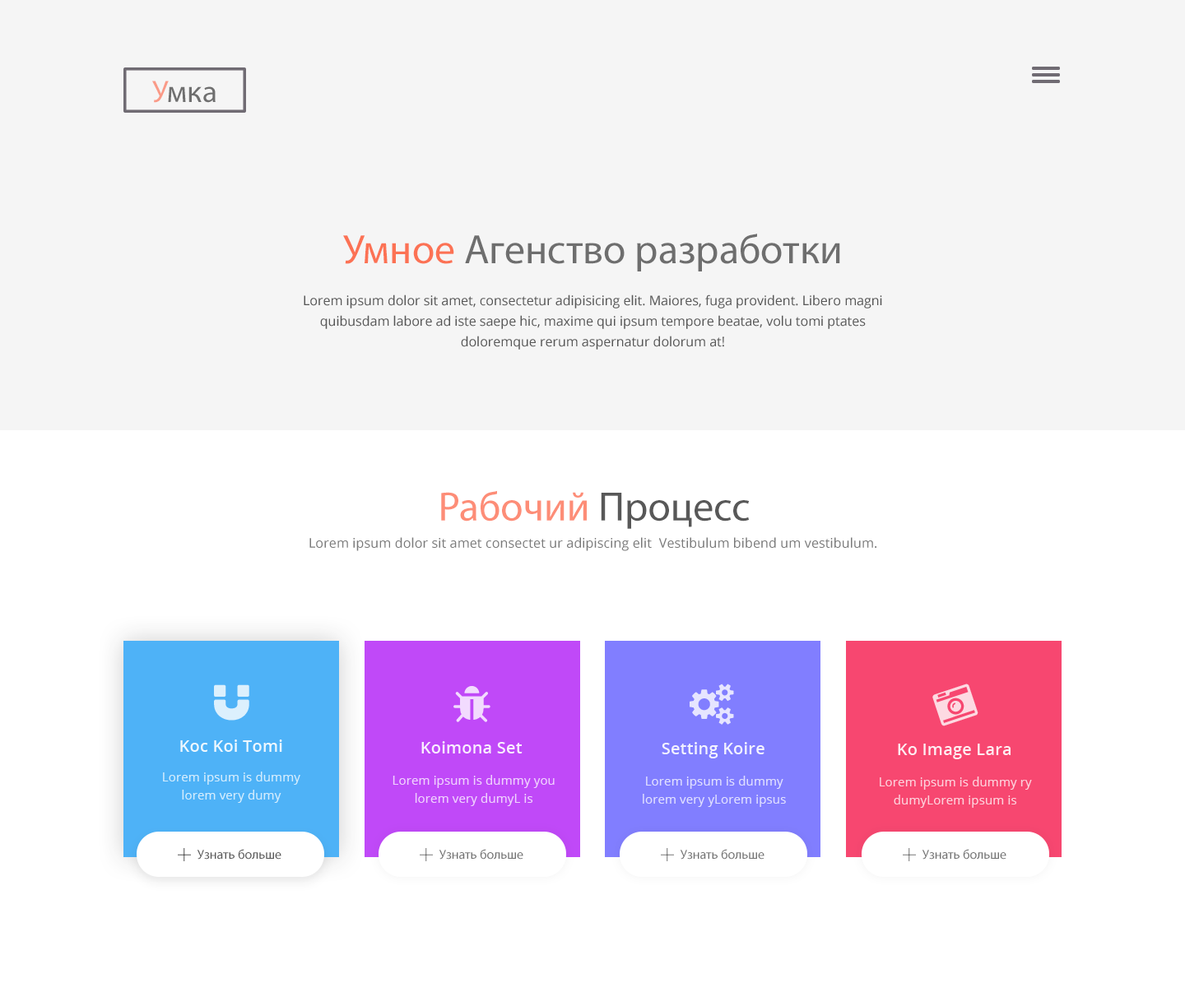
<style>
.page{position:relative;width:1185px;height:1006px;background:#ffffff}
.page>*{position:absolute;margin:0}
.t1{font:31.1px "MyriadPro-Regular";color:#6f6f6f}
.t2{font:41.1px "MyriadPro-Regular";color:#626262}
.t3{font:41.1px "MyriadPro-Regular";color:#fc6744}
.t4{font:13.2px/20.6px "OpenSans";color:#565656}
.t5{font:41.1px "MyriadPro-Regular"}
.t6{font:13.2px "OpenSans";letter-spacing:0.01em;color:#7a7a7a}
.t7{font:16.5px "OpenSans-Semibold";letter-spacing:0.01em;color:#ffffff}
.t8{font:12.3px/18.1px "OpenSans";letter-spacing:0.01em;color:#d3ecfd}
.t9{font:12.3px/18.1px "OpenSans";letter-spacing:0.01em;color:#efd1fd}
.t10{font:12.3px/18.1px "OpenSans";letter-spacing:0.01em;color:#dfdfff}
.t11{font:12.3px/18.1px "OpenSans";letter-spacing:0.01em;color:#fdd1db}
.t12{font:13.2px "MyriadPro-Regular";color:#585858}
.t13{font:13.2px "MyriadPro-Regular";color:#737373}
</style>
<div class="page">
<p class="t1" style="left:152px;top:81px;width:64px;height:22px">Умка</p>
<p class="t2" style="left:343px;top:234px;width:497px;height:38px;opacity:0.94"><span class="t3">Умное</span> Агенство разработки</p>
<p class="t4" style="left:304px;top:295px;width:578px;height:55px;text-align:center">Lorem ipsum dolor sit amet, consectetur adipisicing elit. Maiores, fuga provident. Libero magni quibusdam labore ad iste saepe hic, maxime qui ipsum tempore beatae, volu tomi ptates        doloremque rerum aspernatur dolorum at!</p>
<p class="t5" style="left:441px;top:490px;width:308px;height:39px">Рабочий Процесс</p>
<p class="t6" style="left:309px;top:537px;width:567px;height:14px">Lorem ipsum dolor sit amet consectet ur adipiscing elit  Vestibulum bibend um vestibulum.</p>
<p class="t7" style="left:180px;top:740px;width:102px;height:12px;opacity:0.9">Koc Koi Tomi</p>
<p class="t7" style="left:421px;top:741px;width:102px;height:13px;opacity:0.9">Koimona Set</p>
<p class="t7" style="left:662px;top:742px;width:102px;height:17px;opacity:0.9">Setting Koire</p>
<p class="t7" style="left:898px;top:744px;width:112px;height:15px;opacity:0.9">Ko Image Lara</p>
<p class="t8" style="left:163px;top:772px;width:137px;height:31px;text-align:center">Lorem ipsum is dummy lorem very dumy</p>
<p class="t9" style="left:393px;top:775px;width:162px;height:31px;text-align:center">Lorem ipsum is dummy you   lorem very dumyL is</p>
<p class="t10" style="left:643px;top:776px;width:143px;height:31px;text-align:center">Lorem ipsum is dummy lorem very yLorem ipsus</p>
<p class="t11" style="left:880px;top:777px;width:152px;height:31px;text-align:center">Lorem ipsum is dummy ry dumyLorem ipsum is</p>
<p class="t12" style="left:197px;top:849px;width:84px;height:11px">Узнать больше</p>
<p class="t13" style="left:439px;top:849px;width:84px;height:11px">Узнать больше</p>
<p class="t13" style="left:680px;top:849px;width:84px;height:11px">Узнать больше</p>
<p class="t13" style="left:922px;top:849px;width:84px;height:11px">Узнать больше</p>
</div>
